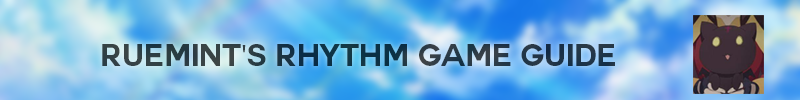
<style>
.page{position:relative;width:800px;height:100px}
.page>*{position:absolute;margin:0}
.t1{font:30px "Couture-Bold";color:#243846}
.t2{font:30px "MyriadPro-Regular";color:#243846}
</style>
<div class="page">
<p class="t1" style="left:102px;top:44px;width:513px;height:22px">ruemint<span class="t2">'</span>s Rhythm Game Guide</p>
</div>
